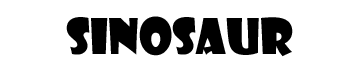
<style>
.page{position:relative;width:340px;height:77px;background:#ffffff}
.page>*{position:absolute;margin:0}
.t1{font:48px "ShowcardGothic-Reg";color:#000000}
</style>
<div class="page">
<p class="t1" style="left:66px;top:16px;width:227px;height:41px">SinoSaUR</p>
</div>
